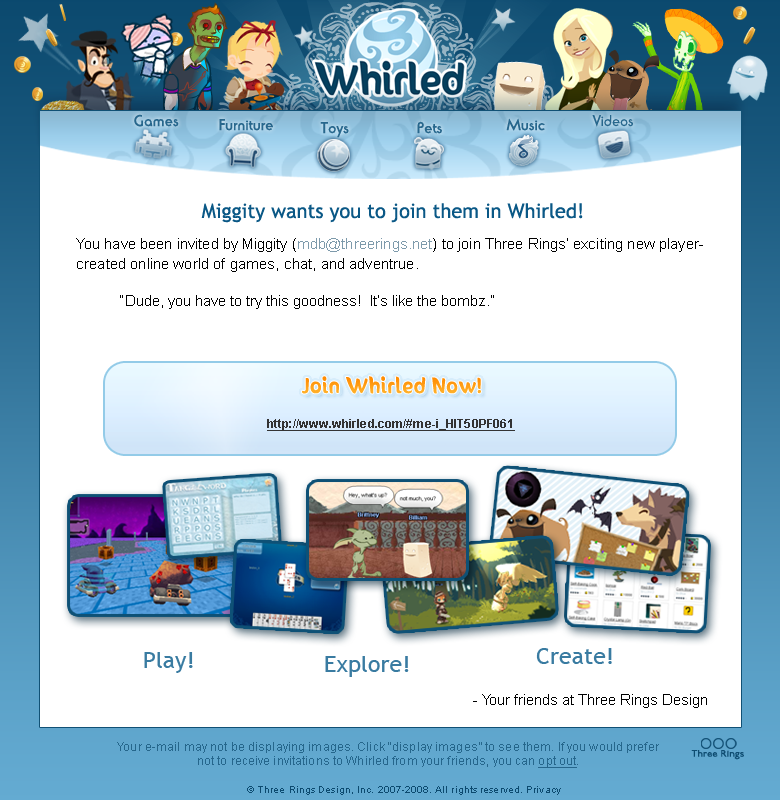
<style>
.page{position:relative;width:780px;height:800px;background:#ffffff}
.page>*{position:absolute;margin:0}
.t1{font:15px "BlippoLightSF";letter-spacing:0.025em;color:#27678d;font-weight:bold}
.t2{font:15px "BlippoLightSF";letter-spacing:0.025em;color:#27678d}
.t3{font:20px "TrebuchetMS";color:#0a5886}
.t4{font:15px/20px "ArialMT";letter-spacing:0.01em;color:#000000}
.t5{font:15px/20px "ArialMT";letter-spacing:0.01em;color:#7d9aab}
.t6{font:15px "ArialMT";color:#000000}
.t7{font:18px "SunnySide";letter-spacing:0.05em;color:#ff8e19}
.t8{font:12px "Arial-BoldMT";letter-spacing:0.01em;color:#343434;text-decoration:underline}
.t9{font:21.8px "TrebuchetMS";color:#397ba1;scale:1.07 1}
.t10{font:12px "ArialMT";letter-spacing:0.01em;color:#25668b}
.t11{font:12px "ArialMT";letter-spacing:0.01em;color:#25668b;text-decoration:underline}
.t12{font:10px "ArialMT";letter-spacing:0.01em;color:#0c4a6f}
</style>
<div class="page">
<p class="t1" style="left:134px;top:114px;width:45px;height:13px">Games</p>
<p class="t1" style="left:219px;top:119px;width:54px;height:12px">Furniture</p>
<p class="t1" style="left:320px;top:122px;width:29px;height:16px">Toys</p>
<p class="t1" style="left:417px;top:121px;width:25px;height:13px">Pets</p>
<p class="t1" style="left:506px;top:118px;width:39px;height:13px">Music</p>
<p class="t2" style="left:592px;top:115px;width:41px;height:12px">Videos</p>
<p class="t3" style="left:201px;top:203px;width:382px;height:20px">Miggity wants you to join them in Whirled!</p>
<p class="t4" style="left:76px;top:238px;width:627px;height:34px">You have been invited by Miggity (<span class="t5">mdb@threerings.net</span>) to join Three Rings’ exciting new player-<br>created online world of games, chat, and adventrue.</p>
<p class="t6" style="left:120px;top:295px;width:374px;height:14px">“Dude, you have to try this goodness!  It’s like the bombz.”</p>
<p class="t7" style="left:302px;top:376px;width:179px;height:18px">Join Whirled Now!</p>
<p class="t8" style="left:267px;top:419px;width:248px;height:12px">http://www.whirled.com/#me-i_HIT50PF061</p>
<p class="t9" style="left:144px;top:652px;width:49px;height:21px">Play!</p>
<p class="t9" style="left:536px;top:648px;width:76px;height:16px">Create!</p>
<p class="t9" style="left:325px;top:656px;width:84px;height:21px">Explore!</p>
<p class="t6" style="left:473px;top:694px;width:234px;height:14px">- Your friends at Three Rings Design</p>
<p class="t10" style="left:117px;top:742px;width:542px;height:26px;text-align:center">Your e-mail may not be displaying images. Click “display images” to see them. If you would prefer not to receive invitations to Whirled from your friends, you can <span class="t11">opt out</span>.</p>
<p class="t12" style="left:247px;top:786px;width:314px;height:9px">© Three Rings Design, Inc. 2007-2008. All rights reserved. Privacy</p>
</div>
